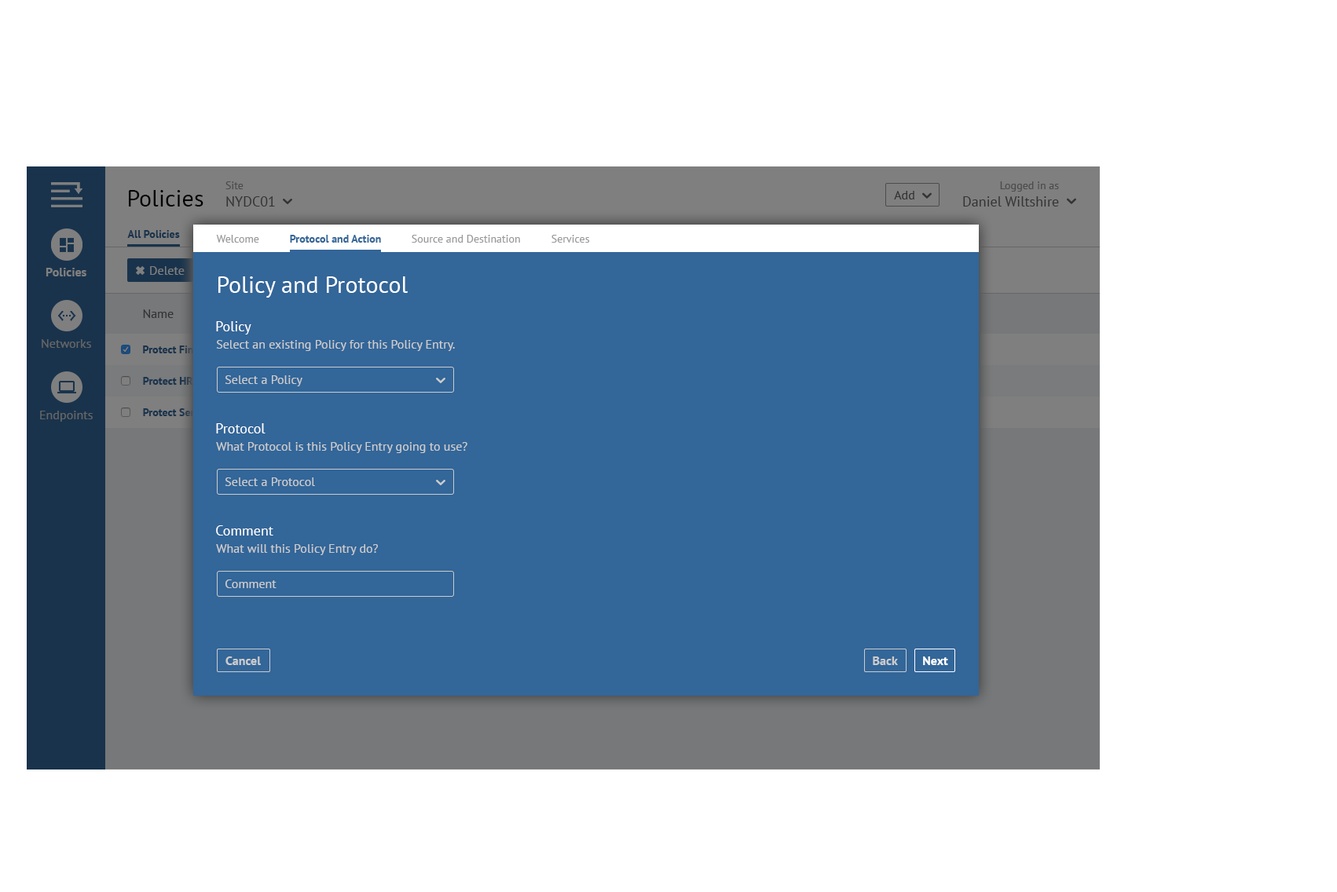
<style>
.page{position:relative;width:1337px;height:892px;background:#ffffff}
.page>*{position:absolute;margin:0}
.t1{font:14.1px "PTSans-Regular"}
.t2{font:11px "PTSans-Regular"}
.t3{font:14.3px "PTSans-Regular"}
.t4{font:11.1px "PTSans-Regular"}
.t5{font:23.6px "PTSans-Regular";color:#000000}
.t6{font:12.6px "PTSans-Regular";color:#333333}
.t7{font:10.9px "PTSans-Bold";color:#19334c}
.t8{font:10.9px "PTSans-Regular";color:#999999}
.t9{font:10.9px "PTSans-Bold";color:#336699}
.t10{font:12.6px "PTSans-Bold";color:#7f7f7f}
.t11{font:12.6px "PTSans-Regular";color:#7f7f7f}
.t12{font:23.6px "PTSans-Regular";color:#ffffff}
.t13{font:14.1px "PTSans-Regular";color:#ffffff}
.t14{font:12.6px "PTSans-Regular";color:#666666}
.t15{font:12.6px "PTSans-Regular";color:#cccccc}
.t16{font:11px "PTSans-Bold"}
.t17{font:11px "PTSans-Bold";color:#19334c}
.t18{font:12.6px "PTSans-Bold";color:#cccccc}
.t19{font:12.6px "PTSans-Bold";color:#ffffff}
</style>
<div class="page">
<p class="t1" style="left:225px;top:181px;width:50px;height:26px"><span class="t2">Site<br></span>NYDC01</p>
<p class="t3" style="left:963px;top:181px;width:96px;height:26px;text-align:right"><span class="t4">Logged in as<br></span>Daniel Wiltshire</p>
<p class="t5" style="left:129px;top:190px;width:74px;height:17px">Policies</p>
<p class="t6" style="left:894px;top:191px;width:20px;height:8px">Add</p>
<p class="t7" style="left:127px;top:230px;width:53px;height:8px">All Policies</p>
<p class="t8" style="left:216px;top:235px;width:43px;height:8px">Welcome</p>
<p class="t9" style="left:290px;top:235px;width:91px;height:8px">Protocol and Action</p>
<p class="t8" style="left:412px;top:235px;width:108px;height:8px">Source and Destination</p>
<p class="t8" style="left:551px;top:235px;width:39px;height:8px">Services</p>
<p class="t10" style="left:46px;top:268px;width:40px;height:8px">Policies</p>
<p class="t11" style="left:150px;top:266px;width:35px;height:9px">Delete</p>
<p class="t12" style="left:218px;top:276px;width:190px;height:22px">Policy and Protocol</p>
<p class="t6" style="left:143px;top:309px;width:31px;height:9px">Name</p>
<p class="t13" style="left:216px;top:321px;width:35px;height:14px">Policy</p>
<p class="t14" style="left:42px;top:339px;width:49px;height:9px">Networks</p>
<p class="t15" style="left:216px;top:340px;width:239px;height:11px">Select an existing Policy for this Policy Entry.</p>
<p class="t16" style="left:143px;top:346px;width:72px;height:7px">Protect Finance</p>
<p class="t17" style="left:143px;top:377px;width:50px;height:8px">Protect HR</p>
<p class="t15" style="left:225px;top:375px;width:77px;height:11px">Select a Policy</p>
<p class="t14" style="left:40px;top:411px;width:53px;height:11px">Endpoints</p>
<p class="t16" style="left:143px;top:408px;width:71px;height:8px">Protect Servers</p>
<p class="t13" style="left:216px;top:423px;width:49px;height:10px">Protocol</p>
<p class="t15" style="left:216px;top:442px;width:251px;height:11px">What Protocol is this Policy Entry going to use?</p>
<p class="t15" style="left:225px;top:477px;width:90px;height:9px">Select a Protocol</p>
<p class="t13" style="left:216px;top:525px;width:57px;height:11px">Comment</p>
<p class="t15" style="left:216px;top:544px;width:162px;height:11px">What will this Policy Entry do?</p>
<p class="t15" style="left:225px;top:580px;width:51px;height:8px">Comment</p>
<p class="t18" style="left:225px;top:657px;width:36px;height:8px">Cancel</p>
<p class="t18" style="left:872px;top:657px;width:26px;height:8px">Back</p>
<p class="t19" style="left:923px;top:657px;width:25px;height:8px">Next</p>
</div>
